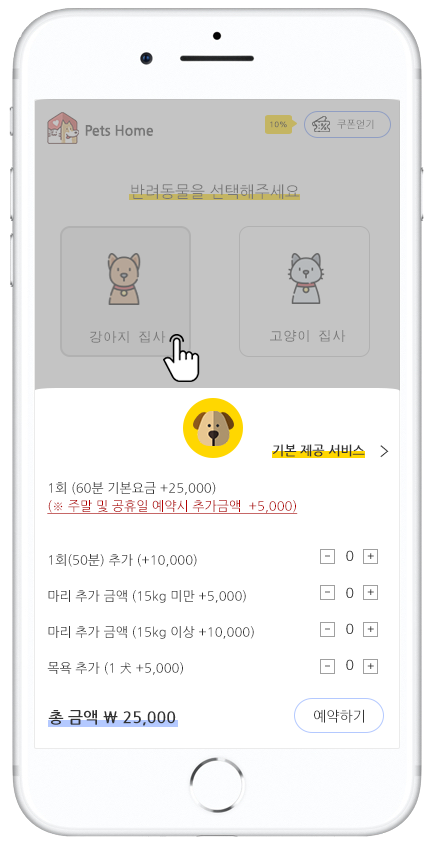
<style>
.page{position:relative;width:431px;height:853px;background:#ffffff}
.page>*{position:absolute;margin:0}
.t1{font:14px "NanumGothicBold";color:#777777}
.t2{font:8px "NanumGothicBold"}
.t3{font:10px "NanumGothic"}
.t4{font:16px "NanumGothic";color:#777777}
.t5{font:14px "MDotum";color:#777777}
.t6{font:13px "NanumGothicBold";color:#333333}
.t7{font:18px "HCRDotum";color:#333333}
.t8{font:13px/36px "NanumGothic";color:#333333}
.t9{font:13px/18px "NanumGothic";color:#333333}
.t10{font:13px/18px "NanumGothic";color:#b10000;text-decoration:underline}
.t11{font:14px "HCRDotum"}
.t12{font:16px "NanumGothicBold";color:#333333}
.t13{font:14px "NanumGothic";color:#333333}
</style>
<div class="page">
<p class="t1" style="left:85px;top:125px;width:68px;height:11px">Pets Home</p>
<p class="t2" style="left:270px;top:121px;width:17px;height:7px">10%</p>
<p class="t3" style="left:337px;top:119px;width:37px;height:10px">쿠폰얻기</p>
<p class="t4" style="left:131px;top:184px;width:169px;height:15px">반려동물을 선택해주세요</p>
<p class="t5" style="left:90px;top:331px;width:76px;height:12px">강아지 집사</p>
<p class="t5" style="left:270px;top:330px;width:76px;height:12px">고양이 집사</p>
<p class="t6" style="left:273px;top:444px;width:92px;height:13px">기본 제공 서비스</p>
<p class="t7" style="left:380px;top:445px;width:9px;height:13px">&gt;</p>
<p class="t8" style="left:47px;top:482px;width:251px;height:193px"><span class="t9">1회 (60분 기본요금 +25,000)<br></span><span class="t10">(※ 주말 및 공휴일 예약시 추가금액  +5,000)<br><br><br></span>1회(50분) 추가 (+10,000)<br>마리 추가 금액 (15kg 미만 +5,000)<br>마리 추가 금액 (15kg 이상 +10,000)<br>목욕 추가 (1 犬 +5,000)</p>
<p class="t11" style="left:367px;top:553px;width:7px;height:6px">+</p>
<p class="t11" style="left:367px;top:589px;width:7px;height:6px">+</p>
<p class="t11" style="left:367px;top:626px;width:7px;height:6px">+</p>
<p class="t11" style="left:367px;top:663px;width:7px;height:6px">+</p>
<p class="t12" style="left:48px;top:710px;width:128px;height:16px">총 금액 \ 25,000</p>
<p class="t13" style="left:314px;top:709px;width:50px;height:14px">예약하기</p>
</div>
